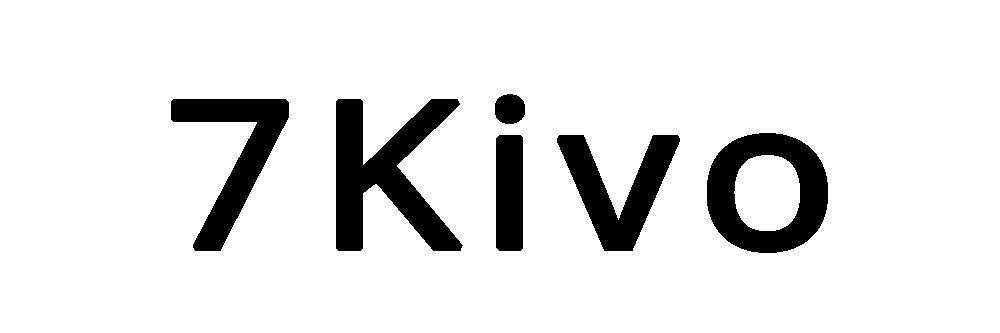
<style>
.page{position:relative;width:1000px;height:333px;background:#ffffff}
.page>*{position:absolute;margin:0}
.t1{font:203.1px "SansSerifCollection";letter-spacing:0.06em;color:#000000;font-weight:bold;scale:1.14 1}
</style>
<div class="page">
<p class="t1" style="left:171px;top:94px;width:657px;height:159px">7Kivo</p>
</div>
